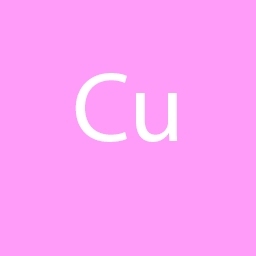
<style>
.page{position:relative;width:256px;height:256px;background:#ff9bf9}
.page>*{position:absolute;margin:0}
.t1{font:100px "MyriadPro-Regular";color:#ffffff}
</style>
<div class="page">
<p class="t1" style="left:75px;top:73px;width:103px;height:69px">Cu</p>
</div>
